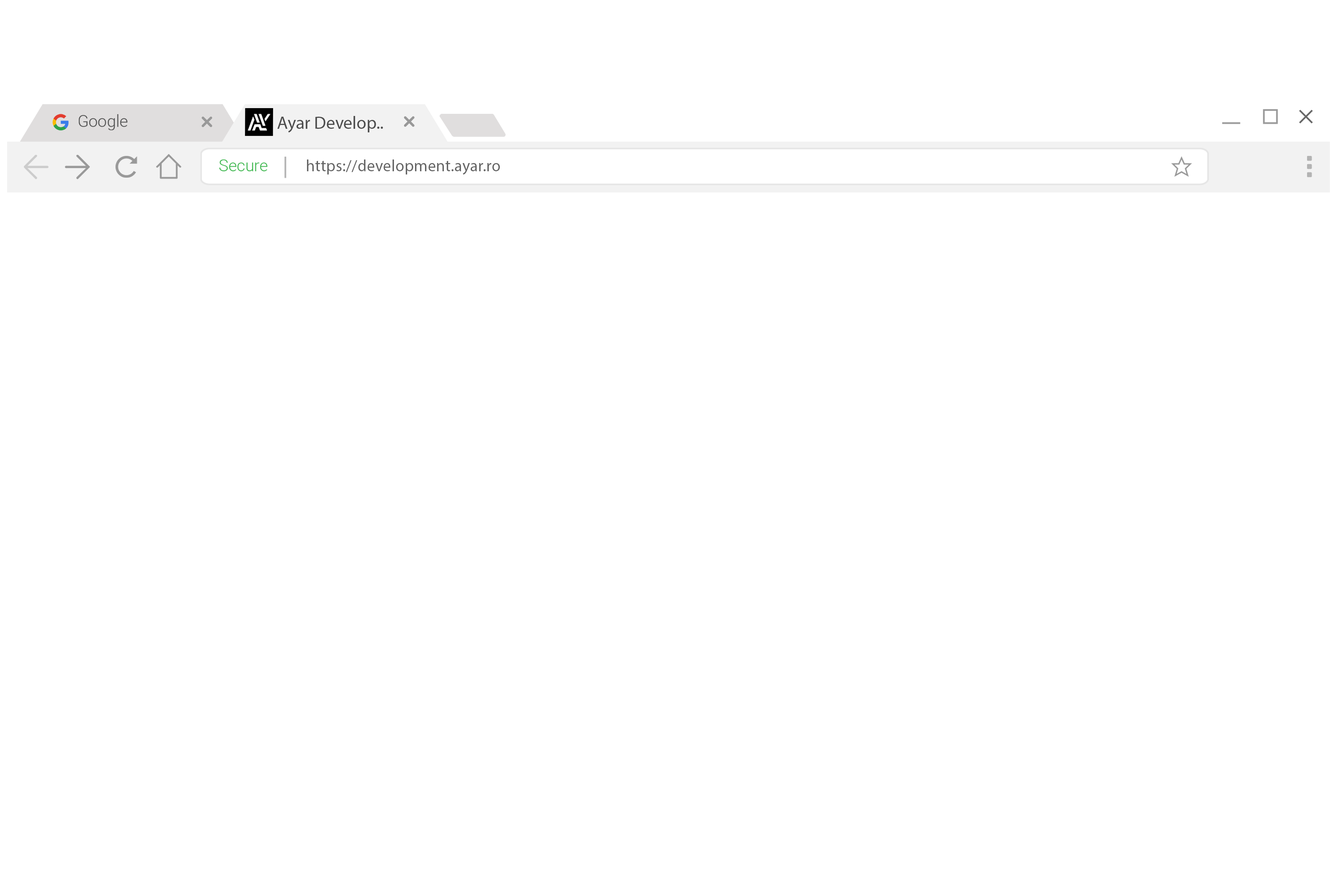
<style>
.page{position:relative;width:1337px;height:892px;background:#ffffff}
.page>*{position:absolute;margin:0}
.t1{font:16.3px "Roboto-Light";color:#4d4d4d}
.t2{font:17.8px "MyriadPro-Regular";color:#4d4d4d}
.t3{font:16.3px "Roboto-Light";color:#39b54a}
.t4{font:16.3px "MyriadPro-Regular";letter-spacing:0.01em;color:#666666}
</style>
<div class="page">
<p class="t1" style="left:79px;top:114px;width:49px;height:16px">Google</p>
<p class="t2" style="left:277px;top:116px;width:106px;height:17px">Ayar Develop..</p>
<p class="t3" style="left:219px;top:159px;width:49px;height:12px">Secure</p>
<p class="t4" style="left:307px;top:159px;width:193px;height:16px">https://development.ayar.ro</p>
</div>
